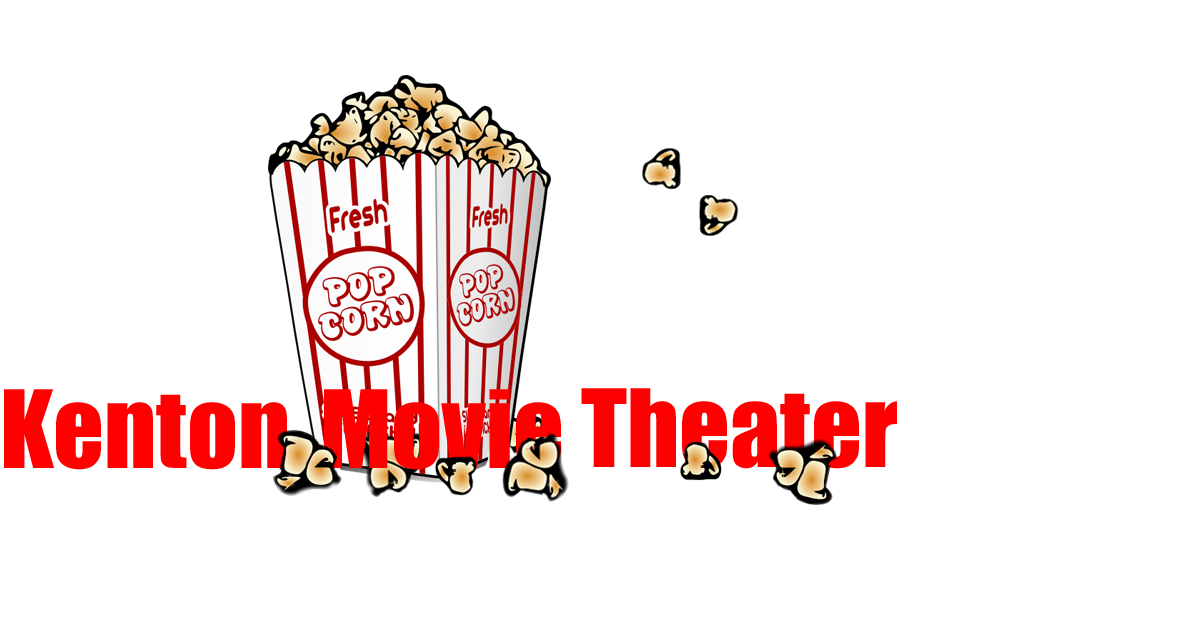
<style>
.page{position:relative;width:1200px;height:620px;background:#ffffff}
.page>*{position:absolute;margin:0}
.t1{font:99.6px "Impact";color:#ff0000}
</style>
<div class="page">
<p class="t1" style="left:4px;top:389px;width:283px;height:81px">Kenton</p>
<p class="t1" style="left:324px;top:389px;width:237px;height:81px">Movie</p>
<p class="t1" style="left:581px;top:388px;width:316px;height:81px">Theater</p>
</div>
